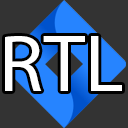
<style>
.page{position:relative;width:128px;height:128px;background:#333333}
.page>*{position:absolute;margin:0}
.t1{font:81.8px "MyriadHebrew-Regular";color:#ffffff}
</style>
<div class="page">
<p class="t1" style="left:5px;top:36px;width:117px;height:55px">RTL</p>
</div>
